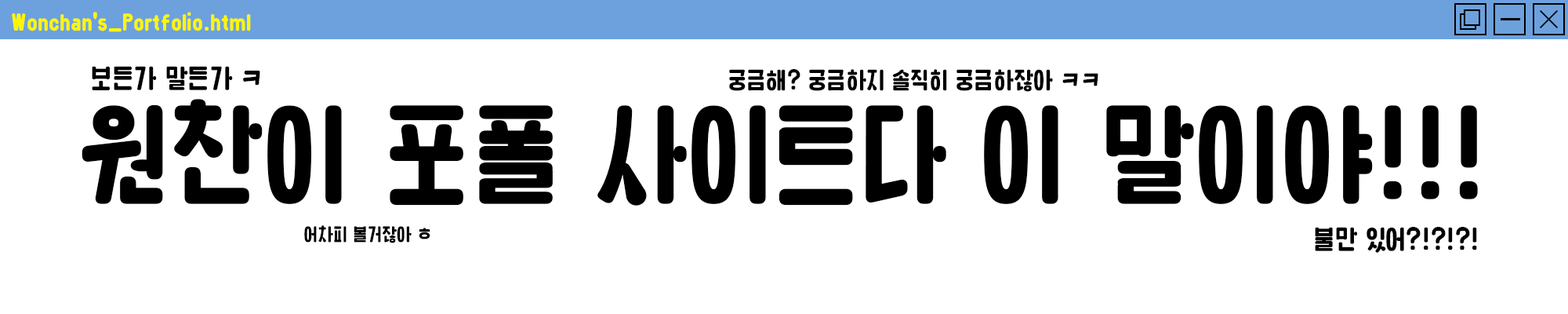
<style>
.page{position:relative;width:1568px;height:314px;background:#ffffff}
.page>*{position:absolute;margin:0}
.t1{font:27.4px "HSSaemaul";color:#fff600}
.t2{font:32.2px "HSSaemaul";color:#000000}
.t3{font:28.4px "HSSaemaul";color:#000000}
.t4{font:134px "HSSaemaul";color:#000000}
.t5{font:21.6px "HSSaemaul";color:#000000}
.t6{font:32px "HSSaemaul";color:#000000}
</style>
<div class="page">
<p class="t1" style="left:12px;top:12px;width:239px;height:20px">Wonchan's_Portfolio.html</p>
<p class="t2" style="left:92px;top:66px;width:168px;height:24px">보든가 말든가 ㅋ</p>
<p class="t3" style="left:729px;top:69px;width:369px;height:23px">궁금해? 궁금하지 솔직히 궁금하잖아 ㅋㅋ</p>
<p class="t4" style="left:82px;top:99px;width:1396px;height:106px">원찬이 포폴 사이트다 이 말이야!!!</p>
<p class="t5" style="left:304px;top:225px;width:126px;height:18px">어차피 볼거잖아 ㅎ</p>
<p class="t6" style="left:1315px;top:227px;width:162px;height:25px">불만 있어?!?!?!</p>
</div>
